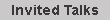
<style>
.page{position:relative;width:110px;height:20px;background:#cac8c8}
.page>*{position:absolute;margin:0}
.t1{font:14px "Arial-BoldMT";color:#393939}
</style>
<div class="page">
<p class="t1" style="left:12px;top:5px;width:86px;height:10px">Invited Talks</p>
</div>
